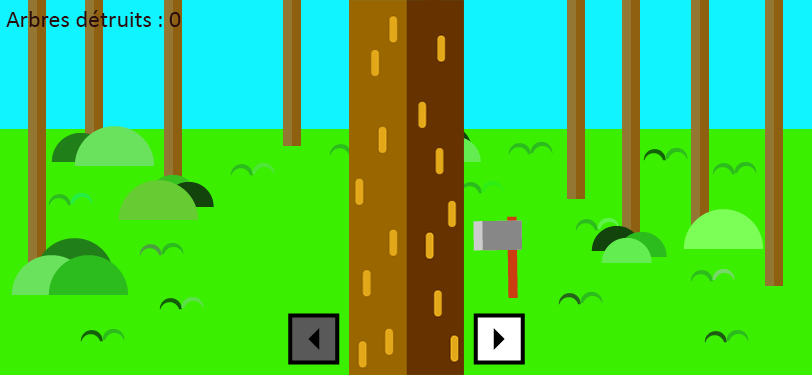
<style>
.page{position:relative;width:812px;height:375px;background:#3aef00}
.page>*{position:absolute;margin:0}
.t1{font:24px "Calibri";color:#2b0d0f}
</style>
<div class="page">
<p class="t1" style="left:6px;top:10px;width:175px;height:17px">Arbres détruits : 0</p>
</div>
